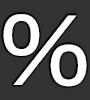
<style>
.page{position:relative;width:90px;height:100px;background:#333333}
.page>*{position:absolute;margin:0}
.t1{font:100px "Amiko-Regular";color:#ffffff}
</style>
<div class="page">
<p class="t1" style="left:3px;top:14px;width:84px;height:73px">%</p>
</div>
